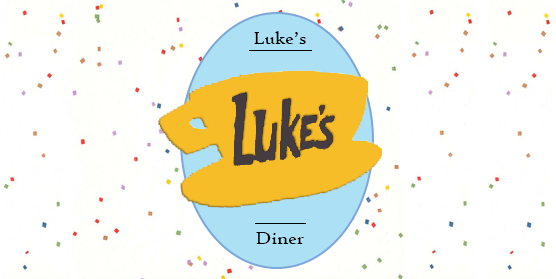
<style>
.page{position:relative;width:556px;height:279px;background:#ffffff}
.page>*{position:absolute;margin:0}
.t1{font:18.9px "HighTowerText-Reg";color:#000000;scale:1.05 1}
</style>
<div class="page">
<p class="t1" style="left:254px;top:31px;width:52px;height:13px">Luke’s</p>
<p class="t1" style="left:256px;top:232px;width:48px;height:12px">Diner</p>
</div>
